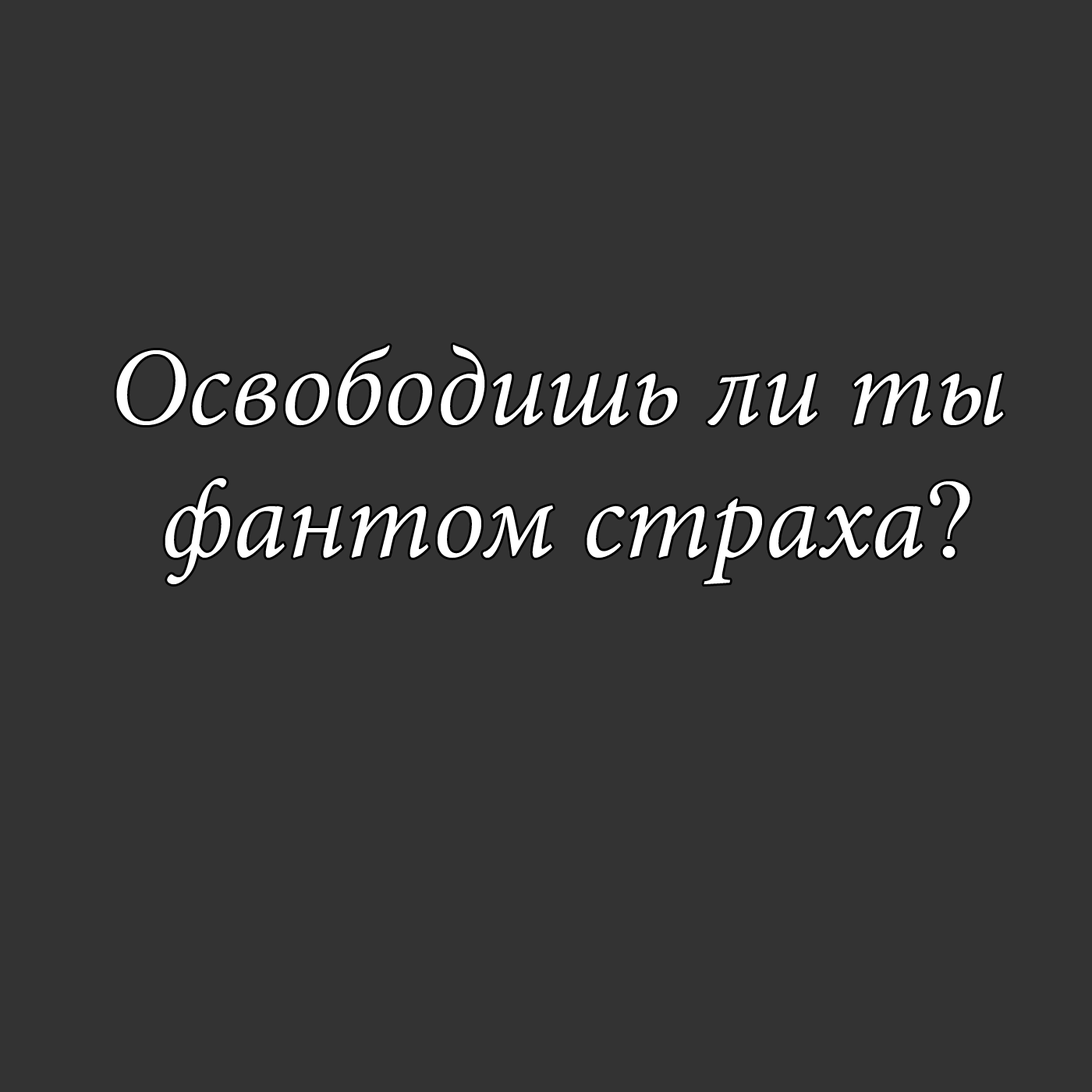
<style>
.page{position:relative;width:1092px;height:1092px;background:#333333}
.page>*{position:absolute;margin:0}
.t1{font:110.5px "MinionPro-It";color:#ffffff}
.t2{font:110.5px "MongolianBaiti";color:#ffffff}
</style>
<div class="page">
<p class="t1" style="left:116px;top:345px;width:888px;height:240px">Освободишь ли ты<br>  фантом страха<span class="t2">?</span></p>
</div>
